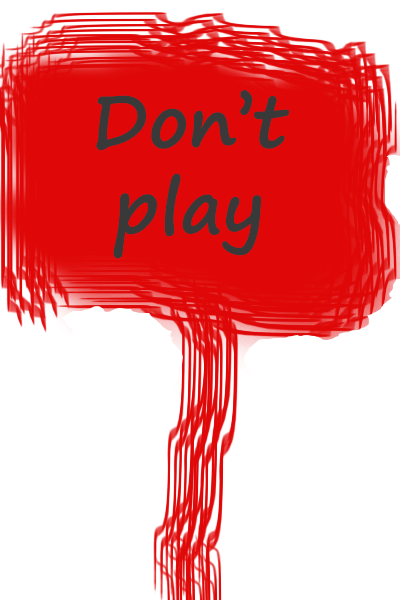
<style>
.page{position:relative;width:400px;height:600px;background:#ffffff}
.page>*{position:absolute;margin:0}
.t1{font:72px "SegoePrint-Bold";color:#393939}
</style>
<div class="page">
<p class="t1" style="left:96px;top:90px;width:194px;height:169px;text-align:center">Don’t<br>play</p>
</div>
